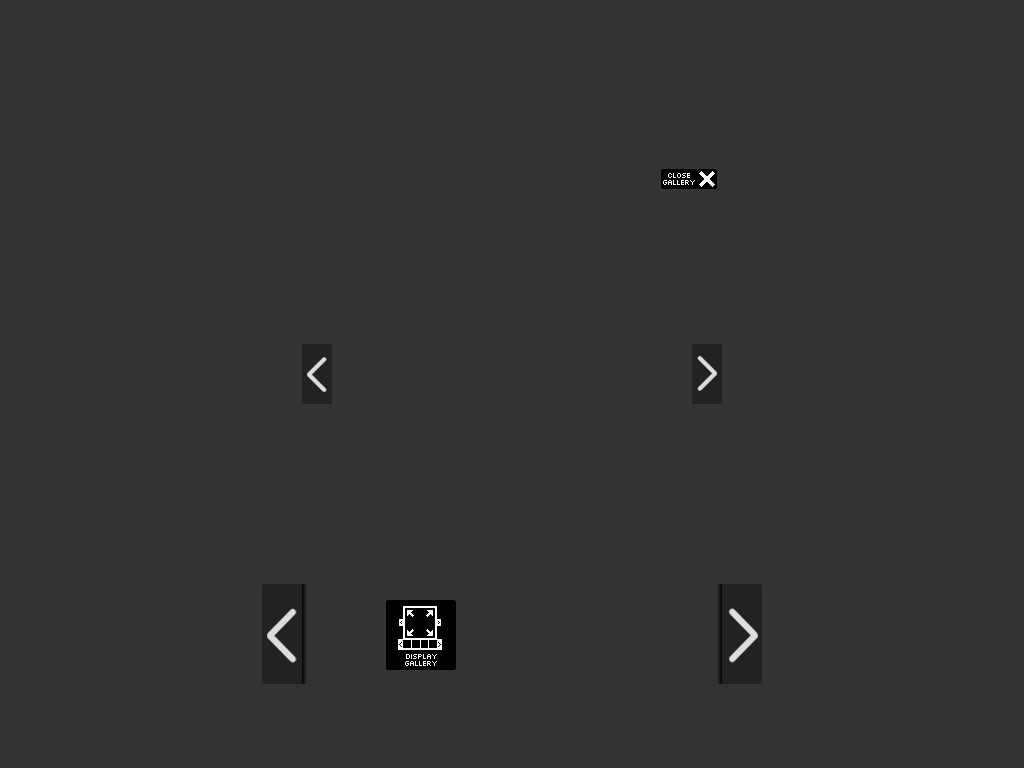
<style>
.page{position:relative;width:1024px;height:768px;background:#333333}
.page>*{position:absolute;margin:0}
.t1{font:8px/7px "Silkscreen";letter-spacing:-0.12em;color:#ffffff}
</style>
<div class="page">
<p class="t1" style="left:663px;top:173px;width:32px;height:12px;text-align:center">close<br>gallery</p>
<p class="t1" style="left:405px;top:654px;width:32px;height:12px;text-align:center">Display<br>gallery</p>
</div>
